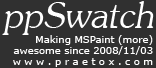
<style>
.page{position:relative;width:156px;height:68px;background:#303030}
.page>*{position:absolute;margin:0}
.t1{font:57px "JasmineUPC";color:#ffffff;font-style:italic}
.t2{font:10px/11px "Verdana";color:#ffffff}
</style>
<div class="page">
<p class="t1" style="left:2px;top:1px;width:152px;height:34px">ppSwatch</p>
<p class="t2" style="left:13px;top:35px;width:140px;height:32px;text-align:right">Making MSPaint (more)<br>awesome since 2008/11/03<br>w w w . p r a e t o x . c o m</p>
</div>
